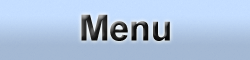
<style>
.page{position:relative;width:250px;height:60px}
.page>*{position:absolute;margin:0}
.t1{font:36px "Arial-BoldMT";letter-spacing:-0.01em}
</style>
<div class="page">
<p class="t1" style="left:81px;top:14px;width:89px;height:27px">Menu</p>
</div>
